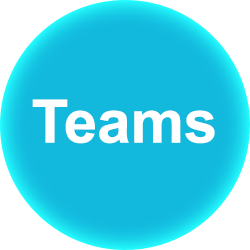
<style>
.page{position:relative;width:250px;height:250px;background:#12b9dd}
.page>*{position:absolute;margin:0}
.t1{font:60px "Arial-BoldMT";color:#ffffff}
</style>
<div class="page">
<p class="t1" style="left:32px;top:99px;width:183px;height:45px">Teams</p>
</div>
